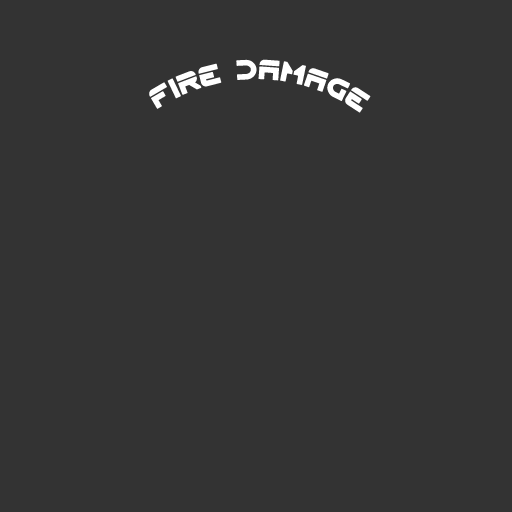
<style>
.page{position:relative;width:512px;height:512px;background:#333333}
.page>*{position:absolute;margin:0}
.t1{font:36px "Flynn";color:#ffffff}
</style>
<div class="page">
<p class="t1" style="left:149px;top:59px;width:222px;height:54px">fire damage</p>
</div>
